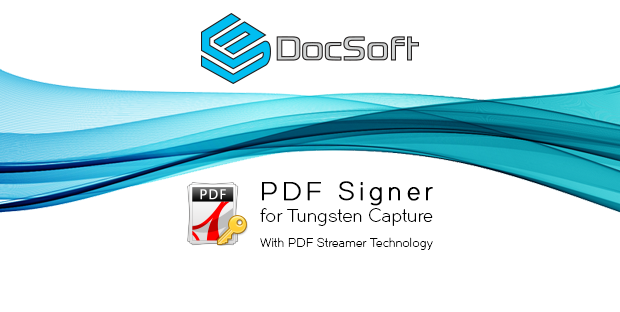
<style>
.page{position:relative;width:620px;height:312px;background:#ffffff}
.page>*{position:absolute;margin:0}
.t1{font:18.2px "Dual-300";letter-spacing:0.025em;color:#000000}
.t2{font:25px "Dual-300";letter-spacing:0.17em;color:#000000;font-weight:bold}
.t3{font:12px "Dual-300";letter-spacing:0.025em;color:#000000}
</style>
<div class="page">
<p class="t1" style="left:260px;top:181px;width:173px;height:45px"><span class="t2">PDF Signer<br></span>for Tungsten Capture</p>
<p class="t3" style="left:260px;top:237px;width:173px;height:13px">With PDF Streamer Technology</p>
</div>
